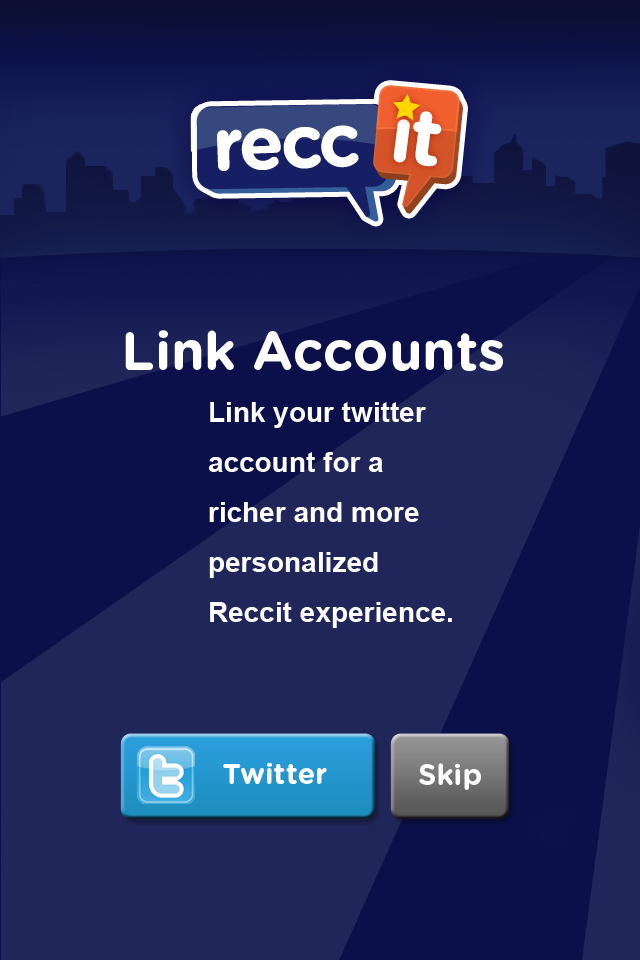
<style>
.page{position:relative;width:640px;height:960px;background:#21265a}
.page>*{position:absolute;margin:0}
.t1{font:53.8px "GothamRounded-Bold";color:#ffffff}
.t2{font:28px/50px "Arial-BoldMT";color:#ffffff}
.t3{font:29px "GothamRounded-Bold";color:#ffffff}
</style>
<div class="page">
<p class="t1" style="left:125px;top:330px;width:378px;height:41px">Link Accounts</p>
<p class="t2" style="left:209px;top:402px;width:243px;height:226px">Link your twitter <br>account for a <br>richer and more <br>personalized <br>Reccit experience.</p>
<p class="t3" style="left:223px;top:762px;width:104px;height:22px">Twitter</p>
<p class="t3" style="left:419px;top:763px;width:62px;height:27px">Skip</p>
</div>
